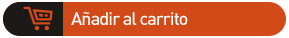
<style>
.page{position:relative;width:289px;height:38px;background:#d34a19}
.page>*{position:absolute;margin:0}
.t1{font:18px "DINPro-Medium";letter-spacing:-0.05em;color:#ffffff}
</style>
<div class="page">
<p class="t1" style="left:71px;top:12px;width:117px;height:13px">Añadir al carrito</p>
</div>
